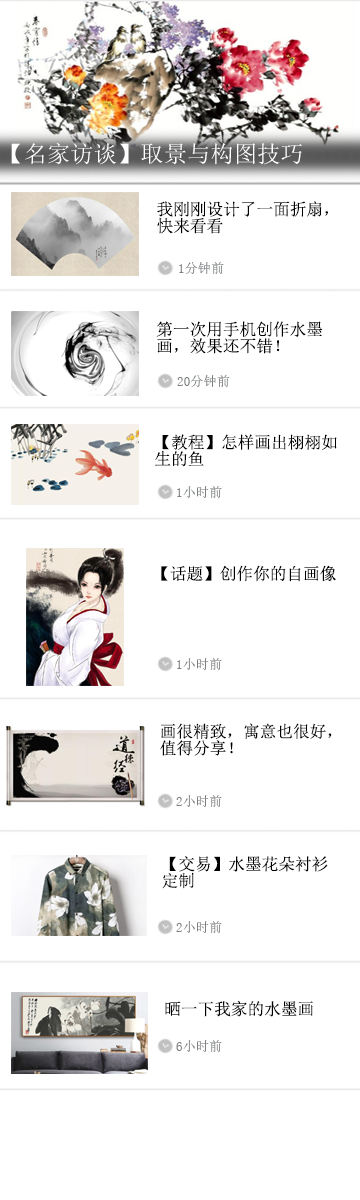
<style>
.page{position:relative;width:360px;height:1200px;background:#ffffff}
.page>*{position:absolute;margin:0}
.t1{font:23.3px "SimSun";color:#ffffff}
.t2{font:16.7px/16.7px "SimSun";color:#000000}
.t3{font:13.3px "SimSun";color:#7d7f81}
.t4{font:16.7px "SimSun";color:#000000}
</style>
<div class="page">
<p class="t1" style="left:11px;top:143px;width:291px;height:22px">【名家访谈】取景与构图技巧</p>
<p class="t2" style="left:157px;top:201px;width:171px;height:33px">我刚刚设计了一面折扇，<br>快来看看</p>
<p class="t3" style="left:179px;top:262px;width:45px;height:12px">1分钟前</p>
<p class="t2" style="left:156px;top:321px;width:167px;height:33px">第一次用手机创作水墨<br>画，效果还不错！</p>
<p class="t3" style="left:177px;top:375px;width:53px;height:12px">20分钟前</p>
<p class="t2" style="left:155px;top:434px;width:182px;height:33px">【教程】怎样画出栩栩如<br>生的鱼</p>
<p class="t3" style="left:177px;top:486px;width:45px;height:12px">1小时前</p>
<p class="t4" style="left:161px;top:565px;width:175px;height:17px">【话题】创作你的自画像</p>
<p class="t3" style="left:177px;top:658px;width:45px;height:12px">1小时前</p>
<p class="t2" style="left:160px;top:723px;width:172px;height:33px">画很精致，寓意也很好，<br>值得分享！</p>
<p class="t3" style="left:176px;top:795px;width:46px;height:12px">2小时前</p>
<p class="t2" style="left:162px;top:856px;width:166px;height:33px">【交易】水墨花朵衬衫<br>定制</p>
<p class="t3" style="left:176px;top:921px;width:46px;height:12px">2小时前</p>
<p class="t4" style="left:165px;top:1001px;width:148px;height:16px">晒一下我家的水墨画</p>
<p class="t3" style="left:176px;top:1040px;width:46px;height:12px">6小时前</p>
</div>
